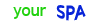
<style>
.page{position:relative;width:108px;height:22px;background:#ffffff}
.page>*{position:absolute;margin:0}
.t1{font:16.7px "Corbel-Bold";color:#0825d8}
.t2{font:16.7px "TrebuchetMS";color:#20d10d}
</style>
<div class="page">
<p class="t1" style="left:56px;top:5px;width:30px;height:16px">SPA</p>
<p class="t2" style="left:13px;top:7px;width:34px;height:12px">your</p>
</div>
